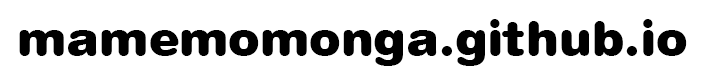
<style>
.page{position:relative;width:701px;height:84px;background:#ffffff}
.page>*{position:absolute;margin:0}
.t1{font:48px "Swiss721BT-BlackRounded";color:#000000}
</style>
<div class="page">
<p class="t1" style="left:19px;top:19px;width:668px;height:47px">mamemomonga.github.io</p>
</div>
